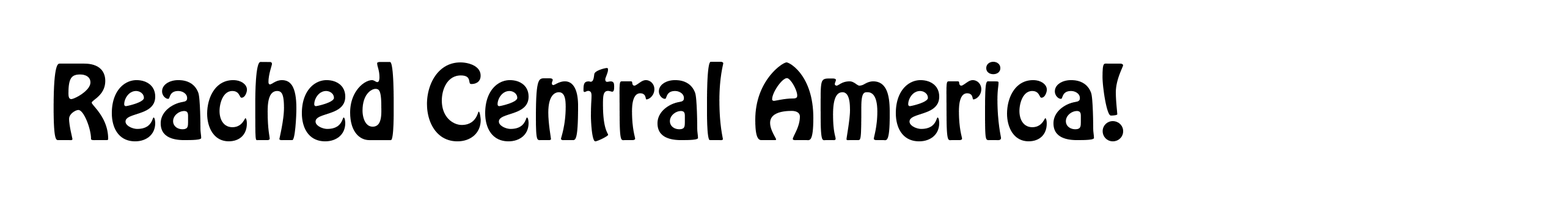
<style>
.page{position:relative;width:1568px;height:208px;background:#ffffff}
.page>*{position:absolute;margin:0}
.t1{font:91.7px "HoboStd";color:#000000}
</style>
<div class="page">
<p class="t1" style="left:53px;top:62px;width:1070px;height:79px">Reached Central America!</p>
</div>
